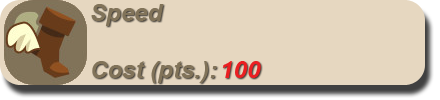
<style>
.page{position:relative;width:440px;height:100px;background:#e6d7c0}
.page>*{position:absolute;margin:0}
.t1{font:24px "Arial-BoldItalicMT";color:#817359}
.t2{font:24px "Arial-BoldItalicMT";color:#eb1f22}
</style>
<div class="page">
<p class="t1" style="left:91px;top:4px;width:73px;height:22px">Speed</p>
<p class="t1" style="left:92px;top:61px;width:125px;height:22px">Cost (pts.):</p>
<p class="t2" style="left:222px;top:61px;width:39px;height:17px">100</p>
</div>
